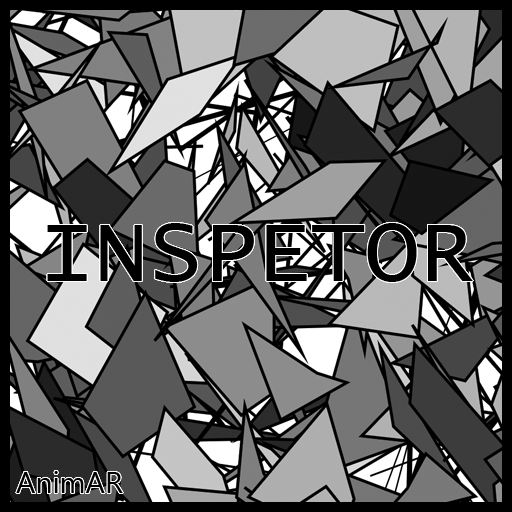
<style>
.page{position:relative;width:512px;height:512px}
.page>*{position:absolute;margin:0}
.t1{font:90px "LucidaConsole";color:#000000}
</style>
<div class="page">
<p class="t1" style="left:47px;top:223px;width:426px;height:59px">INSPETOR</p>
</div>
